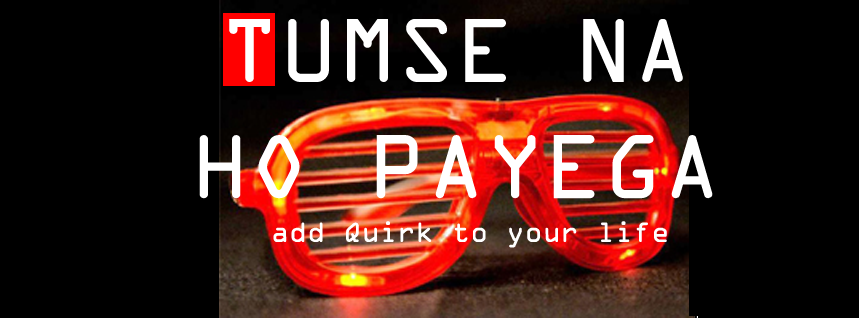
<style>
.page{position:relative;width:859px;height:318px;background:#000000}
.page>*{position:absolute;margin:0}
.t1{font:96.8px "OCRAExtended";color:#ffffff}
.t2{font:30px "OCRAExtended";color:#ffffff}
</style>
<div class="page">
<p class="t1" style="left:199px;top:19px;width:514px;height:180px;text-align:center">TUMSE NA<br>HO PAYEGA</p>
<p class="t2" style="left:273px;top:221px;width:394px;height:27px">add Quirk to your life</p>
</div>
